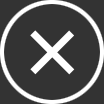
<style>
.page{position:relative;width:104px;height:104px;background:#333333}
.page>*{position:absolute;margin:0}
.t1{font:118.9px "Constantia";color:#ffffff}
</style>
<div class="page">
<p class="t1" style="left:30px;top:30px;width:45px;height:45px;rotate:45deg">+</p>
</div>
